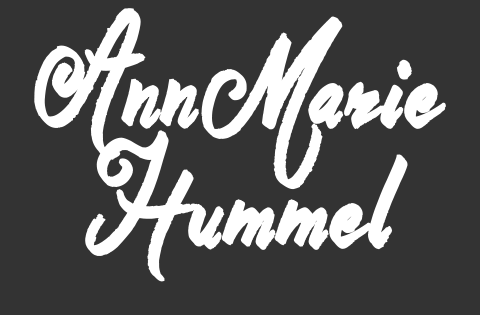
<style>
.page{position:relative;width:480px;height:315px;background:#333333}
.page>*{position:absolute;margin:0}
.t1{font:130px/120px "BelieverFever";letter-spacing:0.012em;color:#ffffff;font-weight:bold}
.t2{font:130px/120px "BelieverFever";letter-spacing:0.015em;color:#ffffff;font-weight:bold}
</style>
<div class="page">
<p class="t1" style="left:34px;top:8px;width:412px;height:274px;text-align:center">Ann<span class="t2">M</span>arie<br>Hummel</p>
</div>
